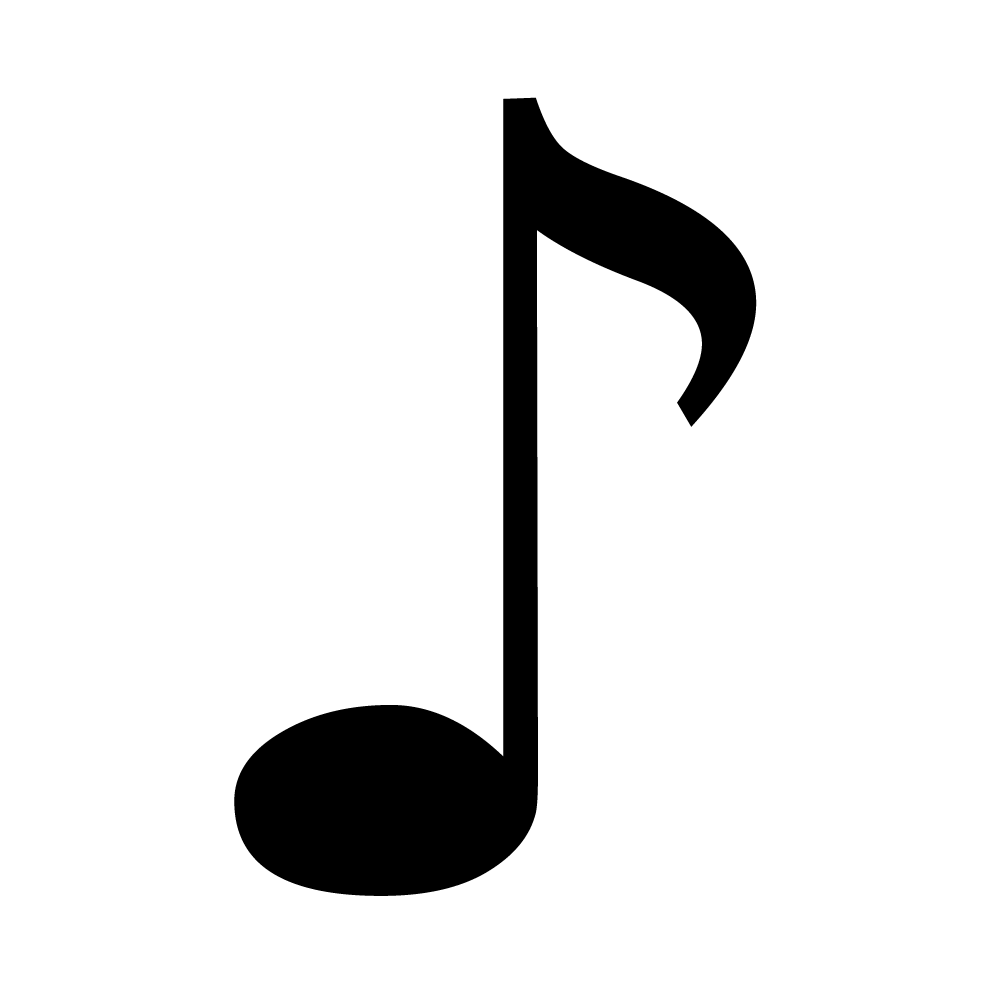
<style>
.page{position:relative;width:1000px;height:1000px;background:#ffffff}
.page>*{position:absolute;margin:0}
.t1{font:1200px "HelveticaNeue";letter-spacing:-0.05em;color:#000000;scale:0.9 1}
</style>
<div class="page">
<p class="t1" style="left:234px;top:97px;width:523px;height:799px">♪</p>
</div>
